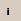
<style>
.page{position:relative;width:21px;height:21px;background:#d9cdc1}
.page>*{position:absolute;margin:0}
.t1{font:9px "Tahoma-Bold";color:#000000}
</style>
<div class="page">
<p class="t1" style="left:7px;top:8px;width:2px;height:7px">i</p>
</div>
